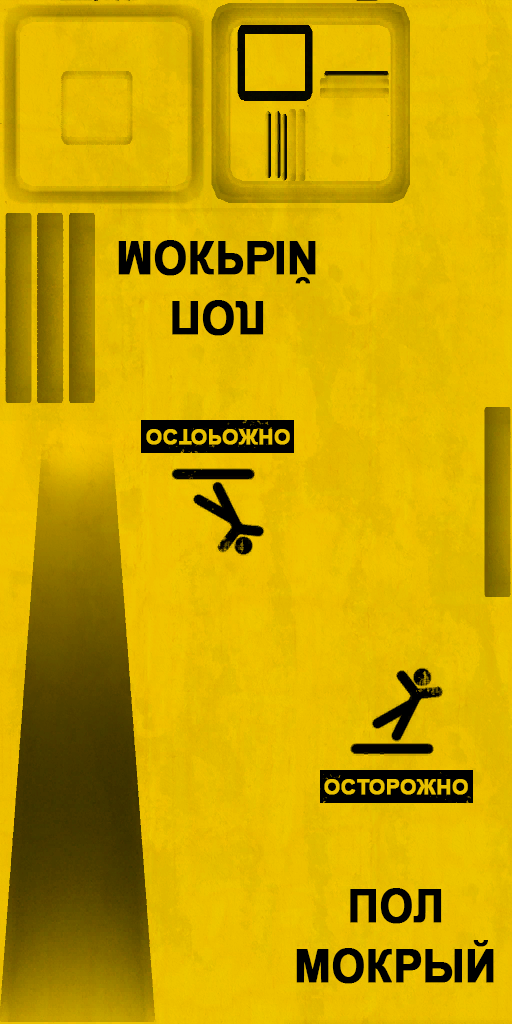
<style>
.page{position:relative;width:512px;height:1024px}
.page>*{position:absolute;margin:0}
.t1{font:46px/60px "Arial-BoldMT";color:#000000;font-weight:bold;scale:0.93 1}
.t2{font:21px "Arial-BoldMT";color:#e8c000;font-weight:bold}
</style>
<div class="page">
<p class="t1" style="left:118px;top:240px;width:198px;height:96px;text-align:center">ПОЛ<br>МОКРЫЙ</p>
<p class="t2" style="left:146px;top:429px;width:144px;height:16px">ОСТОРОЖНО</p>
<p class="t2" style="left:324px;top:779px;width:144px;height:16px">ОСТОРОЖНО</p>
<p class="t1" style="left:296px;top:888px;width:198px;height:96px;text-align:center">ПОЛ<br>МОКРЫЙ</p>
</div>
